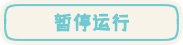
<style>
.page{position:relative;width:183px;height:45px;background:#f7f3e9}
.page>*{position:absolute;margin:0}
.t1{font:12px "shetumodengxiaofangti";color:#6ecad0;font-weight:bold;scale:0.94 1}
</style>
<div class="page">
<p class="t1" style="left:54px;top:13px;width:76px;height:19px">暂停运行</p>
</div>
